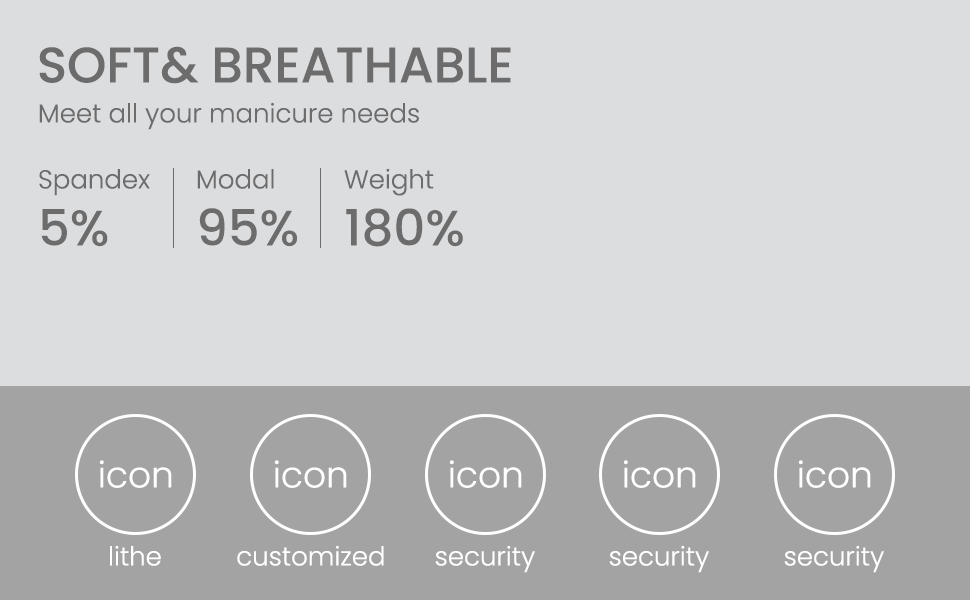
<style>
.page{position:relative;width:970px;height:600px;background:#dcdddf}
.page>*{position:absolute;margin:0}
.t1{font:50px "Poppins-Medium";color:#6c6c6c;text-transform:uppercase}
.t2{font:26px "Poppins-Light";color:#6c6c6c}
.t3{font:50px "Poppins-Medium";color:#6c6c6c}
.t4{font:36px "Poppins-Light";color:#ffffff}
.t5{font:26px "Poppins-Light";color:#ffffff}
</style>
<div class="page">
<p class="t1" style="left:39px;top:46px;width:472px;height:38px">SOFT&amp; BREATHABLE</p>
<p class="t2" style="left:39px;top:102px;width:380px;height:28px">Meet all your manicure needs</p>
<p class="t2" style="left:39px;top:169px;width:111px;height:27px">Spandex</p>
<p class="t2" style="left:197px;top:169px;width:77px;height:20px">Modal</p>
<p class="t2" style="left:344px;top:168px;width:90px;height:28px">Weight</p>
<p class="t3" style="left:41px;top:209px;width:67px;height:38px">5%</p>
<p class="t3" style="left:199px;top:208px;width:98px;height:39px">95%</p>
<p class="t3" style="left:346px;top:208px;width:117px;height:39px">180%</p>
<p class="t4" style="left:99px;top:460px;width:73px;height:28px">icon</p>
<p class="t4" style="left:274px;top:460px;width:73px;height:28px">icon</p>
<p class="t4" style="left:449px;top:460px;width:73px;height:28px">icon</p>
<p class="t4" style="left:623px;top:460px;width:73px;height:28px">icon</p>
<p class="t4" style="left:798px;top:460px;width:73px;height:28px">icon</p>
<p class="t5" style="left:110px;top:545px;width:51px;height:21px">lithe</p>
<p class="t5" style="left:237px;top:545px;width:147px;height:21px">customized</p>
<p class="t5" style="left:435px;top:545px;width:100px;height:28px">security</p>
<p class="t5" style="left:609px;top:545px;width:100px;height:28px">security</p>
<p class="t5" style="left:784px;top:545px;width:100px;height:28px">security</p>
</div>
